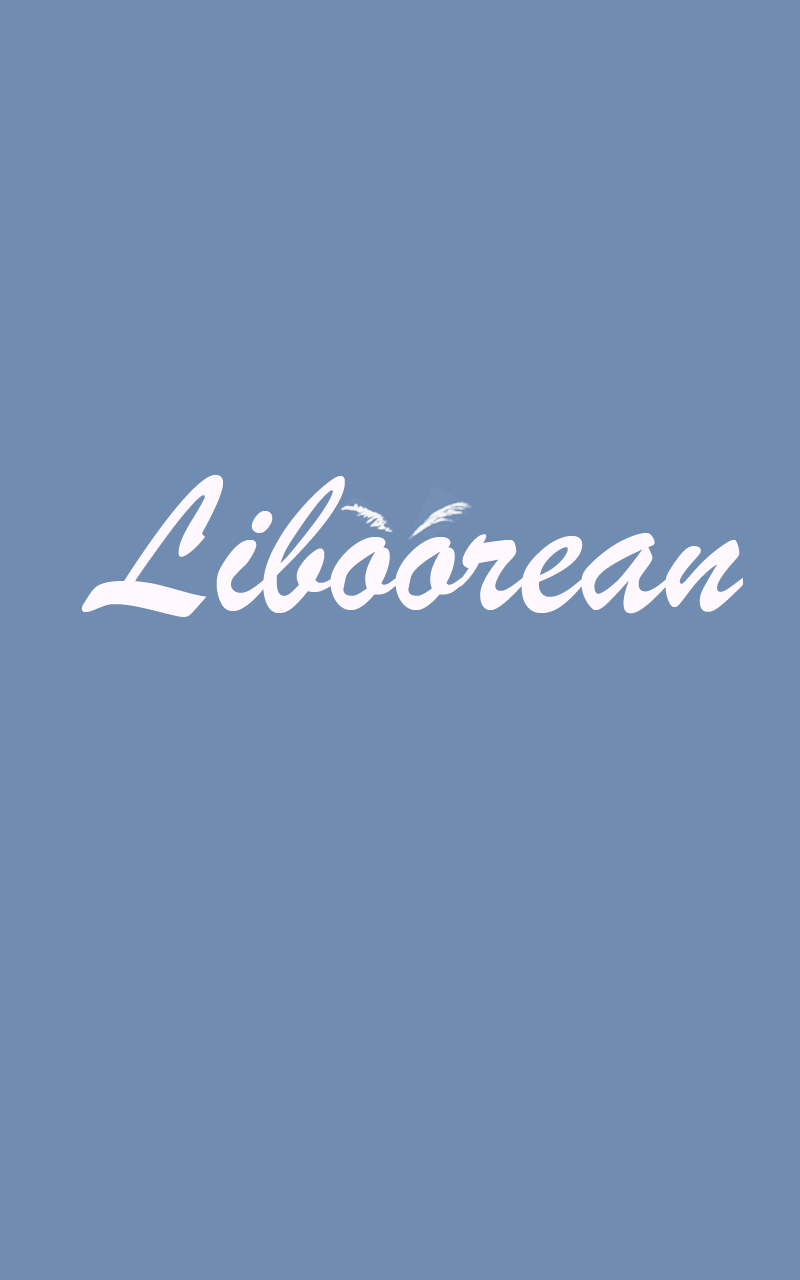
<style>
.page{position:relative;width:800px;height:1280px;background:#708cb1}
.page>*{position:absolute;margin:0}
.t1{font:207.3px "BrushScriptMT";color:#fff9ff}
</style>
<div class="page">
<p class="t1" style="left:81px;top:474px;width:662px;height:143px">Liboorean</p>
</div>
